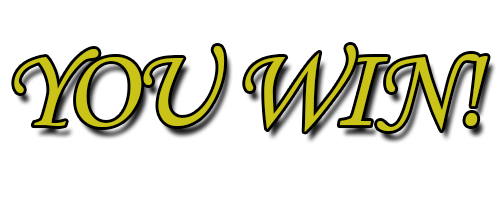
<style>
.page{position:relative;width:500px;height:200px;background:#ffffff}
.page>*{position:absolute;margin:0}
.t1{font:117.1px "MonotypeCorsiva";letter-spacing:-0.04em;color:#cac419}
</style>
<div class="page">
<p class="t1" style="left:14px;top:45px;width:474px;height:87px">YOU WIN!</p>
</div>
